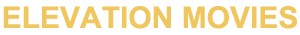
<style>
.page{position:relative;width:300px;height:35px;background:#ffffff}
.page>*{position:absolute;margin:0}
.t1{font:30px "Arial-BoldMT";color:#efc75e}
</style>
<div class="page">
<p class="t1" style="left:3px;top:6px;width:294px;height:23px">ELEVATION MOVIES</p>
</div>
